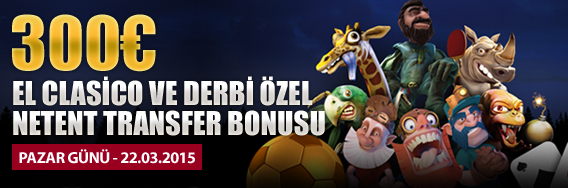
<style>
.page{position:relative;width:568px;height:188px}
.page>*{position:absolute;margin:0}
.t1{font:68.9px "Impact"}
.t2{font:30.3px "Impact"}
.t3{font:16px "MyriadPro-Bold";letter-spacing:-0.025em;color:#ffffff}
</style>
<div class="page">
<p class="t1" style="left:12px;top:14px;width:144px;height:58px">300€</p>
<p class="t2" style="left:13px;top:76px;width:300px;height:30px">EL CLASİCO VE DERBİ ÖZEL</p>
<p class="t2" style="left:13px;top:110px;width:312px;height:26px">NETENT TRANSFER BONUSU</p>
<p class="t3" style="left:19px;top:149px;width:176px;height:15px">PAZAR GÜNÜ - 22.03.2015</p>
</div>
